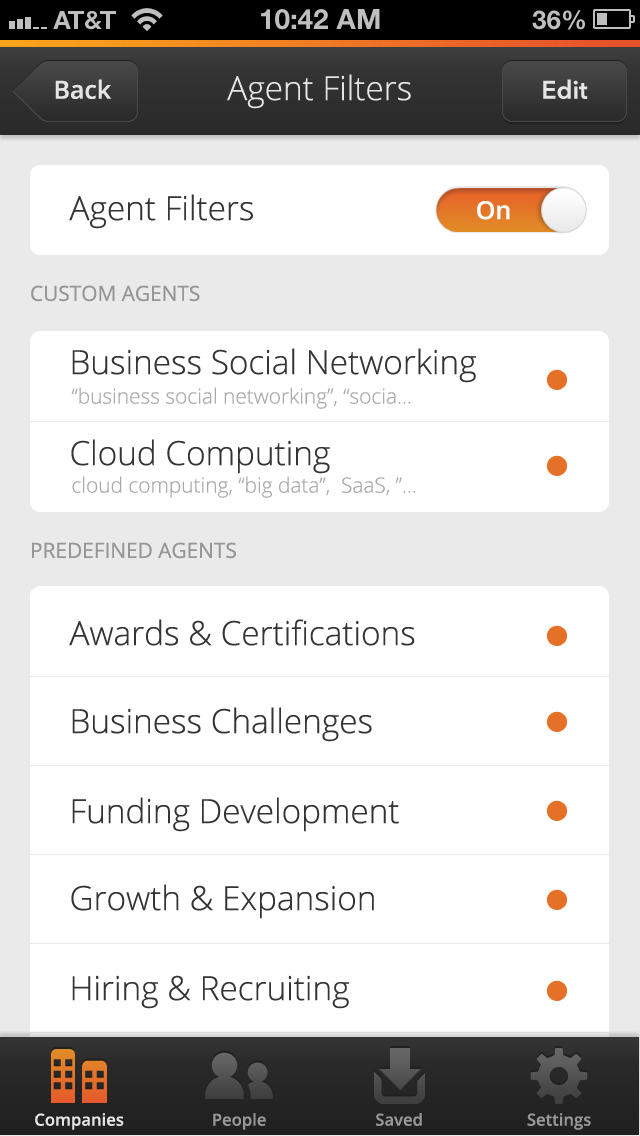
<style>
.page{position:relative;width:640px;height:1136px;background:#ffffff}
.page>*{position:absolute;margin:0}
.t1{font:33.3px "OpenSans-Light";color:#e5e5e5}
.t2{font:25px "OpenSans-Semibold";color:#e5e5e5}
.t3{font:25px "AvenirNext-DemiBold";color:#e5e5e5}
.t4{font:33.3px "OpenSans-Light";color:#343434}
.t5{font:25px "OpenSans-Semibold";color:#ffffff}
.t6{font:20.8px "OpenSans";color:#969696}
.t7{font:20.8px "OpenSans-Light";color:#aaaaaa}
.t8{font:16.7px "OpenSans-Semibold";color:#e5e5e5}
.t9{font:16.7px "OpenSans-Semibold";color:#969696}
</style>
<div class="page">
<p class="t1" style="left:227px;top:74px;width:184px;height:35px">Agent Filters</p>
<p class="t2" style="left:55px;top:79px;width:57px;height:20px">Back</p>
<p class="t3" style="left:543px;top:79px;width:45px;height:20px">Edit</p>
<p class="t4" style="left:69px;top:194px;width:184px;height:35px">Agent Filters</p>
<p class="t5" style="left:477px;top:201px;width:33px;height:19px">On</p>
<p class="t6" style="left:31px;top:285px;width:169px;height:17px">CUSTOM AGENTS</p>
<p class="t4" style="left:72px;top:348px;width:404px;height:35px">Business Social Networking</p>
<p class="t7" style="left:71px;top:387px;width:340px;height:22px">“business social networking”, “socia...</p>
<p class="t4" style="left:71px;top:439px;width:259px;height:35px">Cloud Computing</p>
<p class="t7" style="left:72px;top:476px;width:344px;height:22px">cloud computing, “big data”,  SaaS, ”...</p>
<p class="t6" style="left:32px;top:542px;width:204px;height:17px">PREDEFINED AGENTS</p>
<p class="t4" style="left:69px;top:619px;width:346px;height:27px">Awards &amp; Certifications</p>
<p class="t4" style="left:72px;top:707px;width:300px;height:35px">Business Challenges</p>
<p class="t4" style="left:72px;top:797px;width:327px;height:35px">Funding Development</p>
<p class="t4" style="left:71px;top:884px;width:303px;height:35px">Growth &amp; Expansion</p>
<p class="t4" style="left:72px;top:975px;width:277px;height:34px">Hiring &amp; Recruiting</p>
<p class="t8" style="left:35px;top:1113px;width:89px;height:17px">Companies</p>
<p class="t9" style="left:213px;top:1113px;width:53px;height:17px">People</p>
<p class="t9" style="left:376px;top:1113px;width:46px;height:13px">Saved</p>
<p class="t9" style="left:527px;top:1113px;width:64px;height:17px">Settings</p>
</div>
